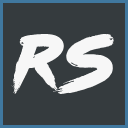
<style>
.page{position:relative;width:128px;height:128px;background:#353b3e}
.page>*{position:absolute;margin:0}
.t1{font:60px "SNNeoNoire-Regular";color:#f7f7f7}
</style>
<div class="page">
<p class="t1" style="left:11px;top:33px;width:103px;height:62px">RS</p>
</div>
